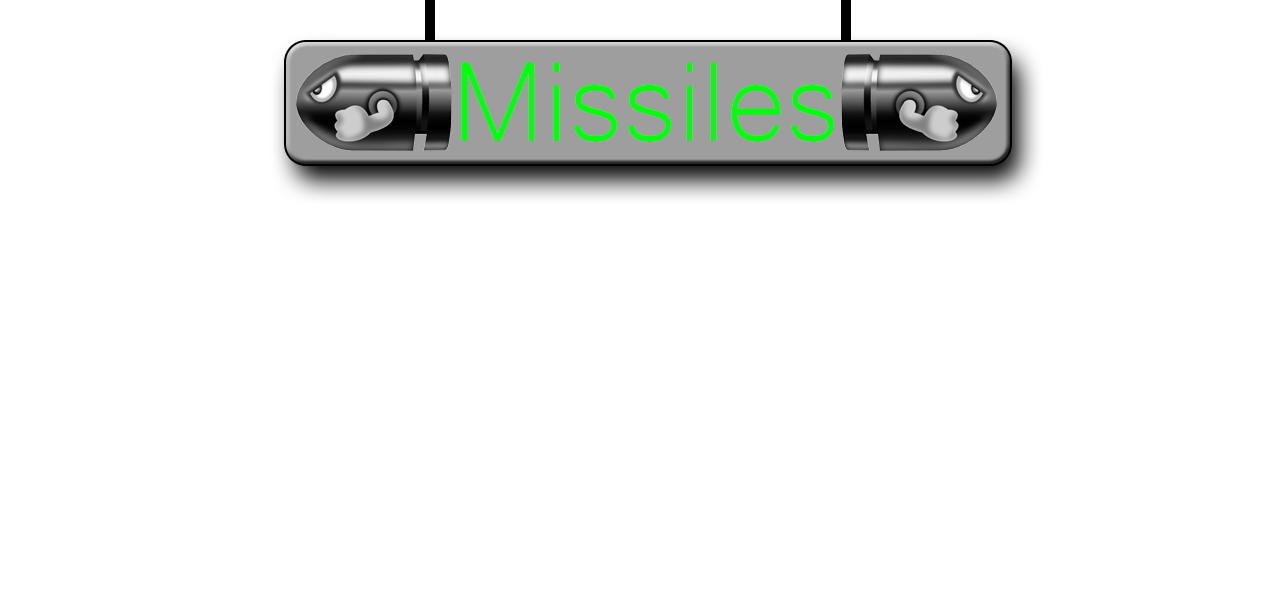
<style>
.page{position:relative;width:1280px;height:600px;background:#ffffff}
.page>*{position:absolute;margin:0}
.t1{font:145.1px "Microsoft-Yi-Baiti";color:#00ff0c}
</style>
<div class="page">
<p class="t1" style="left:461px;top:63px;width:373px;height:79px">Missiles</p>
</div>
